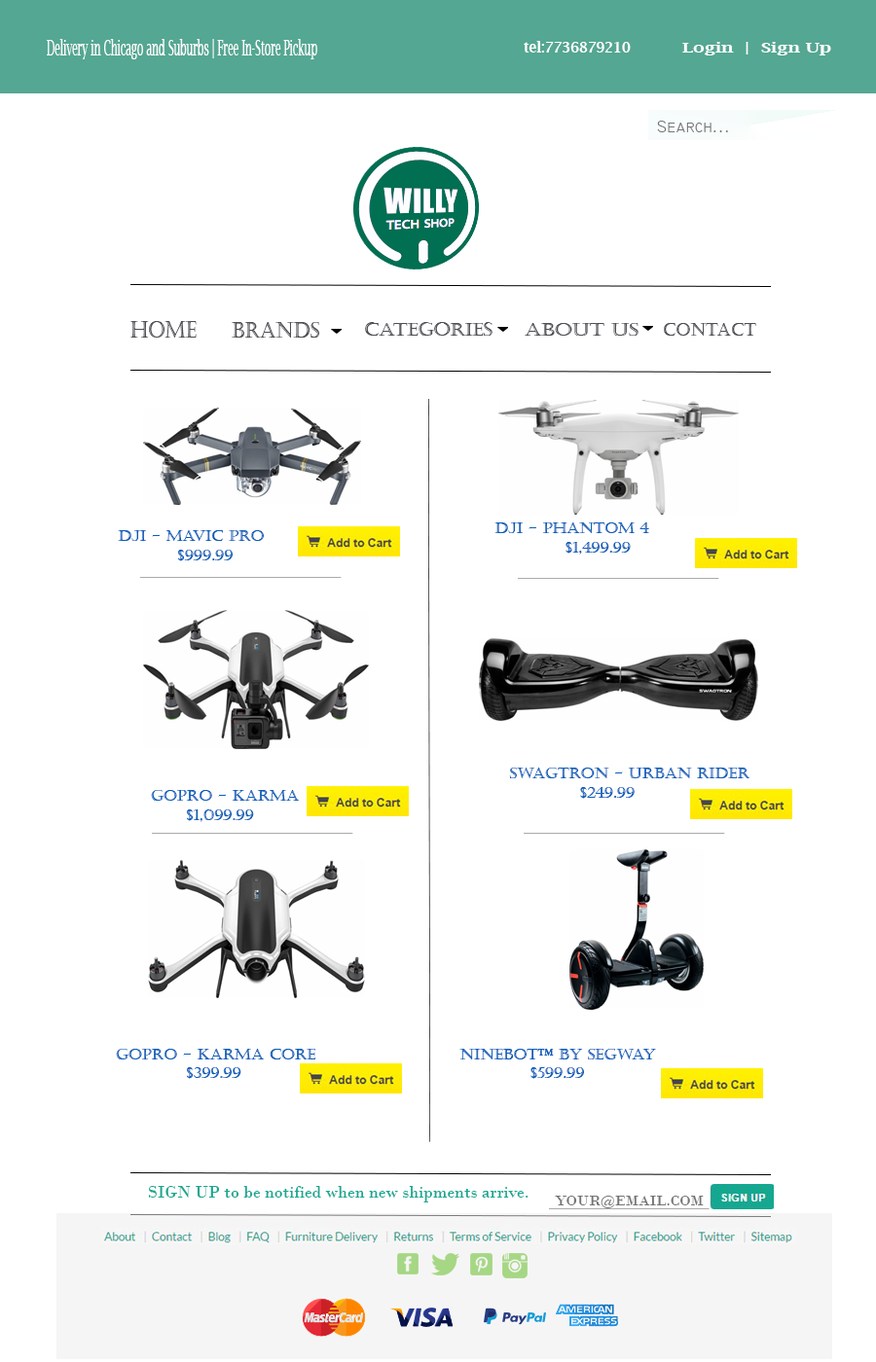
<style>
.page{position:relative;width:876px;height:1362px;background:#ffffff}
.page>*{position:absolute;margin:0}
.t1{font:21.8px "LucidaBright";color:#ffffff;scale:0.47 1}
.t2{font:14.5px "LucidaBright-Demi";color:#ffffff;scale:0.95 1}
.t3{font:13.9px "LucidaBright-Demi";color:#ffffff;scale:1.32 1}
.t4{font:11.2px "LucidaBright-Demi";color:#ffffff;scale:1.32 1}
.t5{font:17.5px "Technic";color:#757575}
.t6{font:23.1px "Castellar";color:#4e4e53;scale:0.84 1}
.t7{font:22.3px "Castellar";color:#4e4e53;scale:0.88 1}
.t8{font:18.8px "Castellar";color:#4e4e53}
.t9{font:17.1px "Castellar";color:#4e4e53;scale:1.18 1}
.t10{font:17.1px "Castellar";color:#4e4e53}
.t11{font:15.6px "Castellar";color:#085eb9}
.t12{font:17.5px "BodoniMT";color:#16a791}
.t13{font:15px "BodoniMT";color:#757575;scale:1.04 1}
</style>
<div class="page">
<p class="t1" style="left:47px;top:39px;width:270px;height:20px">Delivery in Chicago and Suburbs | Free In-Store Pickup</p>
<p class="t2" style="left:523px;top:41px;width:107px;height:12px">tel:7736879210</p>
<p class="t3" style="left:682px;top:42px;width:149px;height:13px"><span class="t4"><br></span>Login  |  Sign Up</p>
<p class="t5" style="left:657px;top:121px;width:71px;height:11px">Search...</p>
<p class="t6" style="left:130px;top:321px;width:67px;height:17px">HOME</p>
<p class="t7" style="left:232px;top:322px;width:87px;height:16px">BRANDS</p>
<p class="t8" style="left:365px;top:322px;width:127px;height:14px">cATEGORIES</p>
<p class="t9" style="left:524px;top:323px;width:114px;height:13px">ABOUT US</p>
<p class="t10" style="left:663px;top:323px;width:93px;height:13px">CONTACT</p>
<p class="t11" style="left:118px;top:530px;width:146px;height:31px">DJI - Mavic Pro <br>  $999.99</p>
<p class="t11" style="left:494px;top:522px;width:155px;height:33px">DJI - Phantom 4<br>  $1,499.99</p>
<p class="t11" style="left:509px;top:768px;width:240px;height:31px">Swagtron - Urban Rider<br>  $249.99</p>
<p class="t11" style="left:151px;top:790px;width:149px;height:32px">GoPro - Karma<br>  $1,099.99</p>
<p class="t11" style="left:116px;top:1049px;width:200px;height:30px">GoPro - Karma Core<br>  $399.99</p>
<p class="t11" style="left:459px;top:1049px;width:197px;height:30px">Ninebot™ by Segway<br>  $599.99</p>
<p class="t12" style="left:148px;top:1186px;width:380px;height:16px">SIGN UP to be notified when new shipments arrive.</p>
<p class="t13" style="left:555px;top:1196px;width:148px;height:12px">YOUR@EMAIL.COM</p>
</div>
